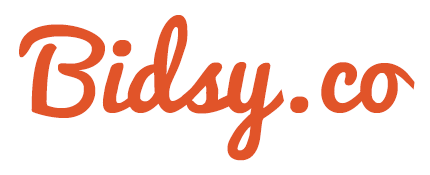
<style>
.page{position:relative;width:430px;height:175px;background:#ffffff}
.page>*{position:absolute;margin:0}
.t1{font:104.6px "Pacifico";color:#e15429}
</style>
<div class="page">
<p class="t1" style="left:19px;top:15px;width:396px;height:146px">Bidsy.co</p>
</div>
